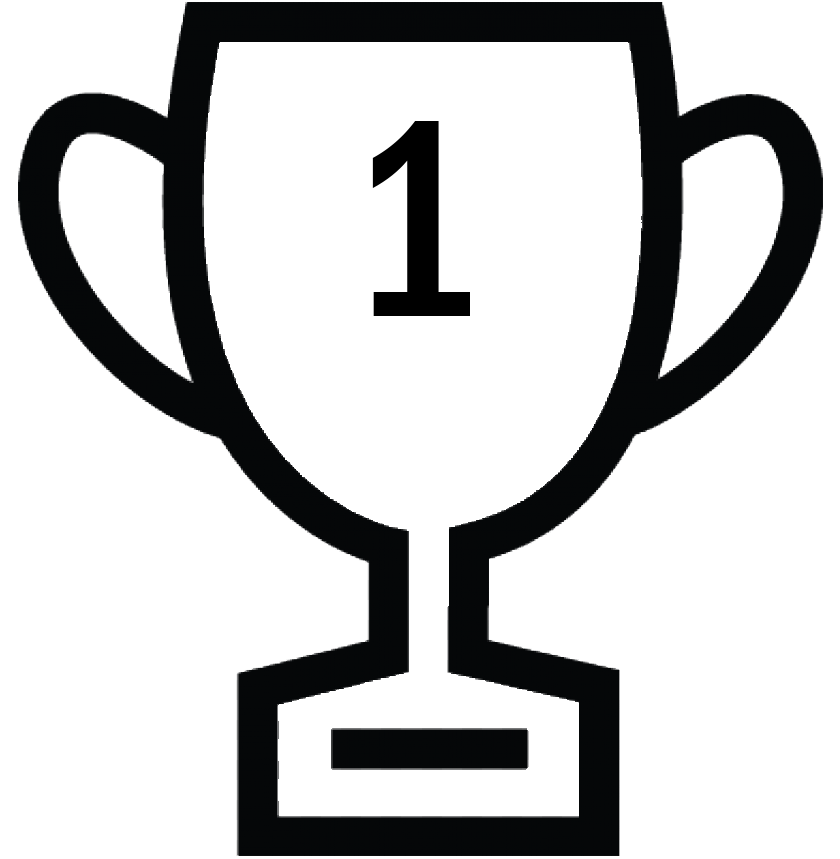
<style>
.page{position:relative;width:840px;height:859px;background:#ffffff}
.page>*{position:absolute;margin:0}
.t1{font:290px "FranklinGothic-MediumCond";color:#000000}
</style>
<div class="page">
<p class="t1" style="left:372px;top:121px;width:98px;height:195px">1</p>
</div>
